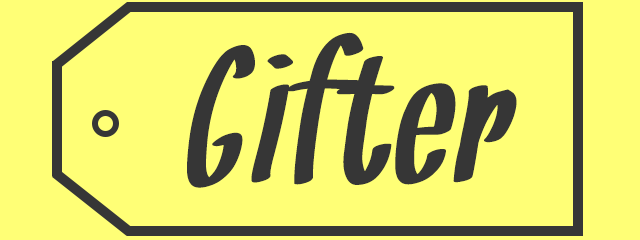
<style>
.page{position:relative;width:640px;height:240px;background:#ffff76}
.page>*{position:absolute;margin:0}
.t1{font:200px "Snickles";letter-spacing:0.04em;color:#363636;scale:0.9 1}
</style>
<div class="page">
<p class="t1" style="left:187px;top:32px;width:330px;height:156px">Gifter</p>
</div>
